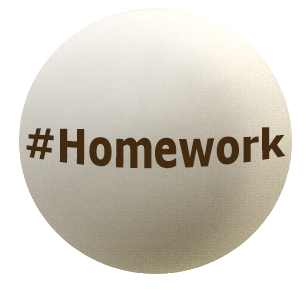
<style>
.page{position:relative;width:306px;height:290px;background:#ffffff}
.page>*{position:absolute;margin:0}
.t1{font:37.5px "Verdana-Bold";color:#442b10}
</style>
<div class="page">
<p class="t1" style="left:26px;top:127px;width:260px;height:42px">#Homework</p>
</div>
